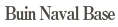
<style>
.page{position:relative;width:118px;height:27px;background:#ffffff}
.page>*{position:absolute;margin:0}
.t1{font:18px "RyuminPro-ExBold";letter-spacing:-0.08em;color:#4c4843;scale:0.9 1}
</style>
<div class="page">
<p class="t1" style="left:5px;top:6px;width:110px;height:15px">Buin Naval Base</p>
</div>
